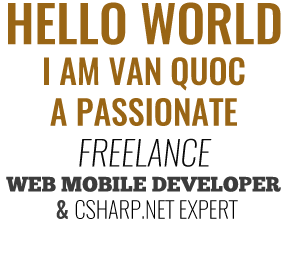
<style>
.page{position:relative;width:290px;height:259px;background:#ffffff}
.page>*{position:absolute;margin:0}
.t1{font:33.9px "Oswald-Medium";color:#996515}
.t2{font:50.9px "Oswald-Medium";color:#996515}
.t3{font:33.9px "Oswald-Extra-LightItalic";color:#090909}
.t4{font:20.9px "ChunkFive-Roman";color:#3c3c3c}
.t5{font:22.6px "Oswald-Medium";color:#3c3c3c}
.t6{font:22.6px "Oswald-ExtraLight";color:#000000}
</style>
<div class="page">
<p class="t1" style="left:6px;top:2px;width:275px;height:217px;text-align:center"><span class="t2">HELLO WORLD<br></span>I AM VAN QUOC<br>A PASSIONATE<br><span class="t3">FREELANCE<br></span><span class="t4">WEB MOBILE DEVELOPER<br> </span><span class="t5">&amp; </span><span class="t6">CSHARP.NET EXPERT</span></p>
</div>
